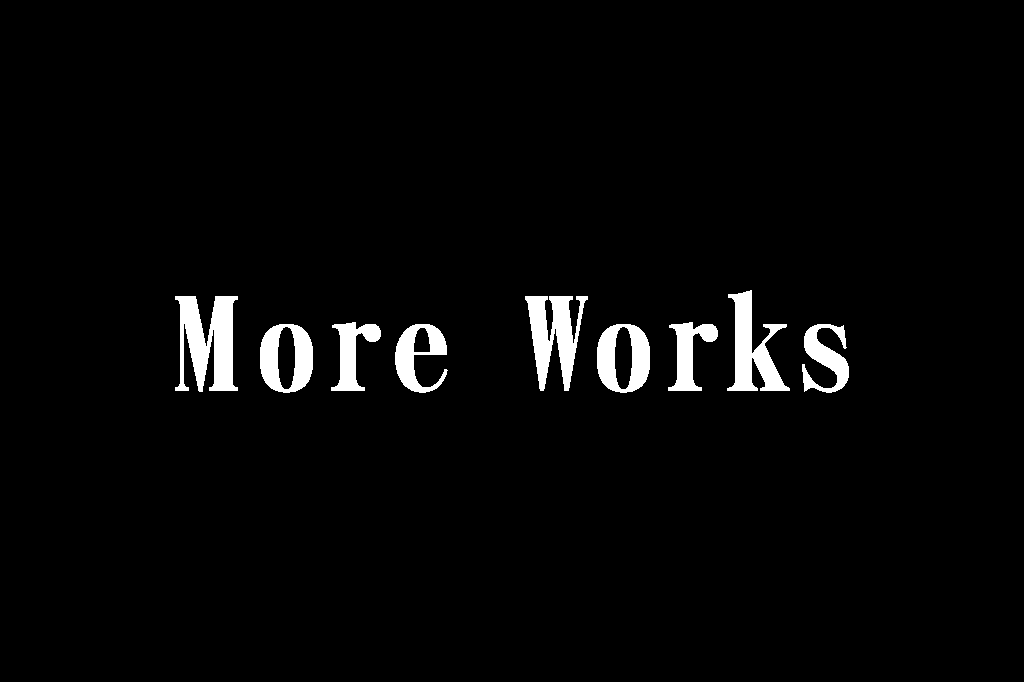
<style>
.page{position:relative;width:1024px;height:682px;background:#000000}
.page>*{position:absolute;margin:0}
.t1{font:130.5px "DFMing-W12-WIN-BF";letter-spacing:0.025em;color:#ffffff}
</style>
<div class="page">
<p class="t1" style="left:175px;top:290px;width:674px;height:103px">More Works</p>
</div>
